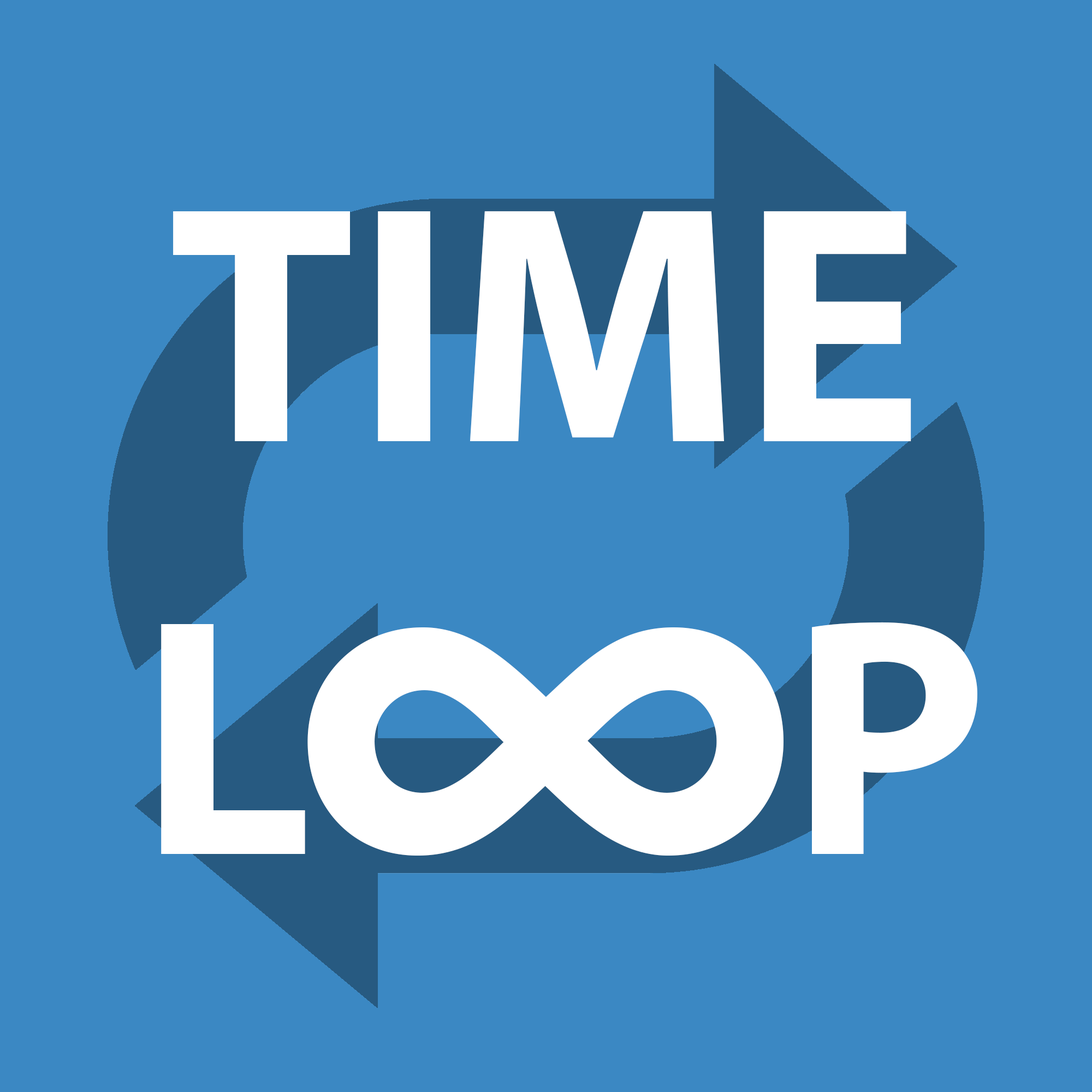
<style>
.page{position:relative;width:1092px;height:1092px;background:#3b88c3}
.page>*{position:absolute;margin:0}
.t1{font:341.2px "MyriadPro-Bold";color:#ffffff}
.t2{font:682.5px "MyriadPro-Bold";color:#ffffff}
</style>
<div class="page">
<p class="t1" style="left:173px;top:211px;width:738px;height:231px">TIME</p>
<p class="t1" style="left:161px;top:624px;width:144px;height:230px">L</p>
<p class="t2" style="left:307px;top:627px;width:476px;height:229px">∞</p>
<p class="t1" style="left:812px;top:622px;width:165px;height:232px">P</p>
</div>
